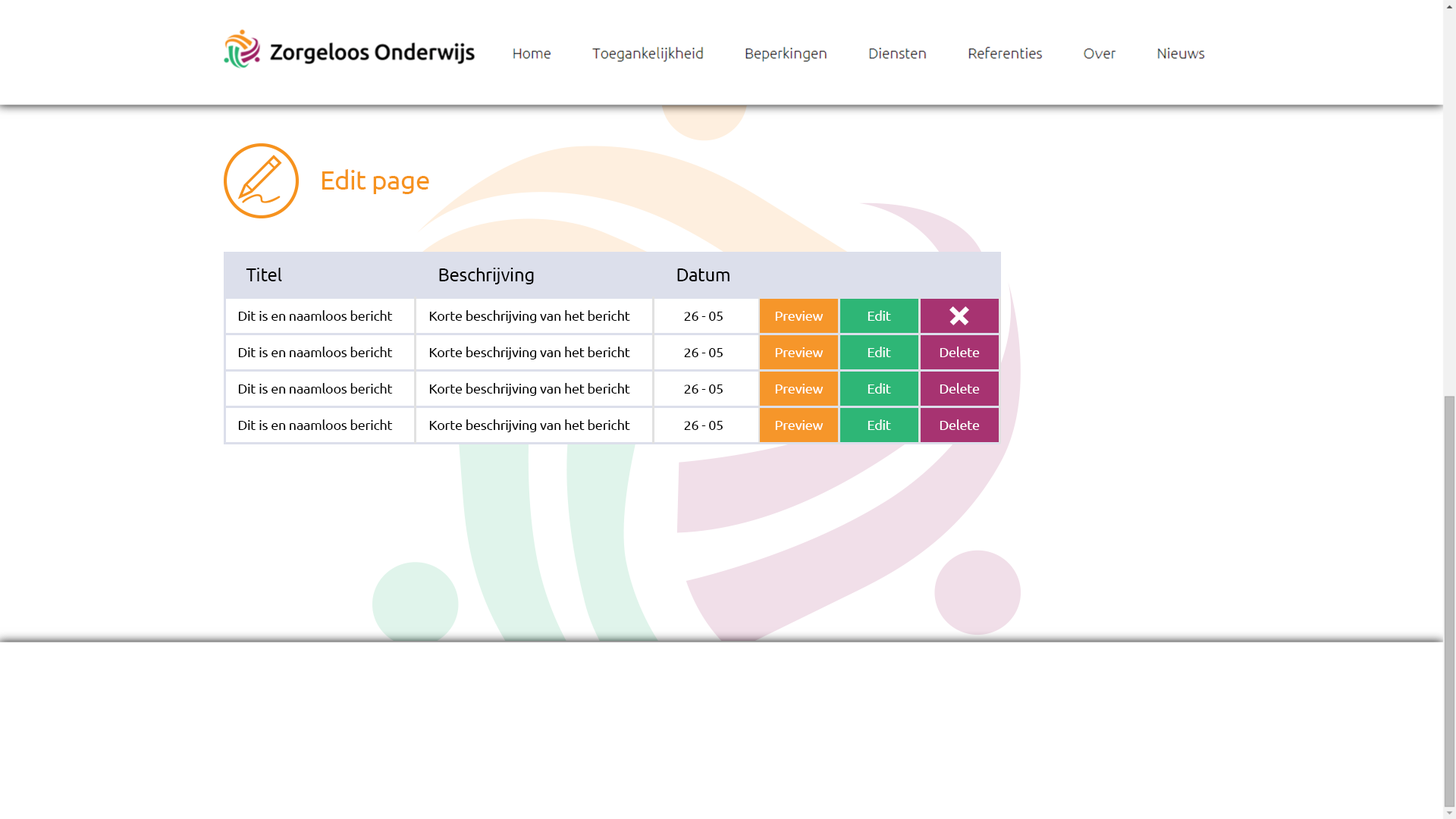
<style>
.page{position:relative;width:1456px;height:819px;background:#ffffff}
.page>*{position:absolute;margin:0}
.t1{font:26.5px "Ubuntu";letter-spacing:-0.015em;color:#f6921e}
.t2{font:18.2px "Ubuntu";letter-spacing:-0.015em;color:#000000}
.t3{font:13.6px "Ubuntu";letter-spacing:-0.015em;color:#000000}
.t4{font:13.6px "Ubuntu";letter-spacing:-0.015em;color:#ffffff}
</style>
<div class="page">
<p class="t1" style="left:322px;top:169px;width:107px;height:25px">Edit page</p>
<p class="t2" style="left:246px;top:268px;width:36px;height:13px">Titel</p>
<p class="t2" style="left:439px;top:268px;width:95px;height:16px">Beschrijving</p>
<p class="t2" style="left:677px;top:268px;width:53px;height:13px">Datum</p>
<p class="t3" style="left:238px;top:310px;width:155px;height:11px">Dit is en naamloos bericht</p>
<p class="t3" style="left:429px;top:310px;width:201px;height:13px">Korte beschrijving van het bericht</p>
<p class="t3" style="left:684px;top:312px;width:39px;height:9px">26 - 05</p>
<p class="t4" style="left:775px;top:311px;width:49px;height:10px">Preview</p>
<p class="t4" style="left:868px;top:310px;width:23px;height:11px">Edit</p>
<p class="t3" style="left:238px;top:347px;width:155px;height:10px">Dit is en naamloos bericht</p>
<p class="t3" style="left:429px;top:347px;width:201px;height:12px">Korte beschrijving van het bericht</p>
<p class="t3" style="left:684px;top:348px;width:39px;height:9px">26 - 05</p>
<p class="t4" style="left:775px;top:347px;width:49px;height:10px">Preview</p>
<p class="t4" style="left:868px;top:347px;width:23px;height:10px">Edit</p>
<p class="t4" style="left:940px;top:347px;width:40px;height:10px">Delete</p>
<p class="t3" style="left:238px;top:383px;width:155px;height:11px">Dit is en naamloos bericht</p>
<p class="t3" style="left:429px;top:383px;width:201px;height:13px">Korte beschrijving van het bericht</p>
<p class="t3" style="left:684px;top:384px;width:39px;height:10px">26 - 05</p>
<p class="t4" style="left:775px;top:384px;width:49px;height:10px">Preview</p>
<p class="t4" style="left:868px;top:383px;width:23px;height:11px">Edit</p>
<p class="t4" style="left:940px;top:383px;width:40px;height:11px">Delete</p>
<p class="t3" style="left:238px;top:419px;width:155px;height:11px">Dit is en naamloos bericht</p>
<p class="t3" style="left:429px;top:419px;width:201px;height:13px">Korte beschrijving van het bericht</p>
<p class="t3" style="left:684px;top:421px;width:39px;height:9px">26 - 05</p>
<p class="t4" style="left:775px;top:420px;width:49px;height:10px">Preview</p>
<p class="t4" style="left:868px;top:419px;width:23px;height:11px">Edit</p>
<p class="t4" style="left:940px;top:419px;width:40px;height:11px">Delete</p>
</div>
